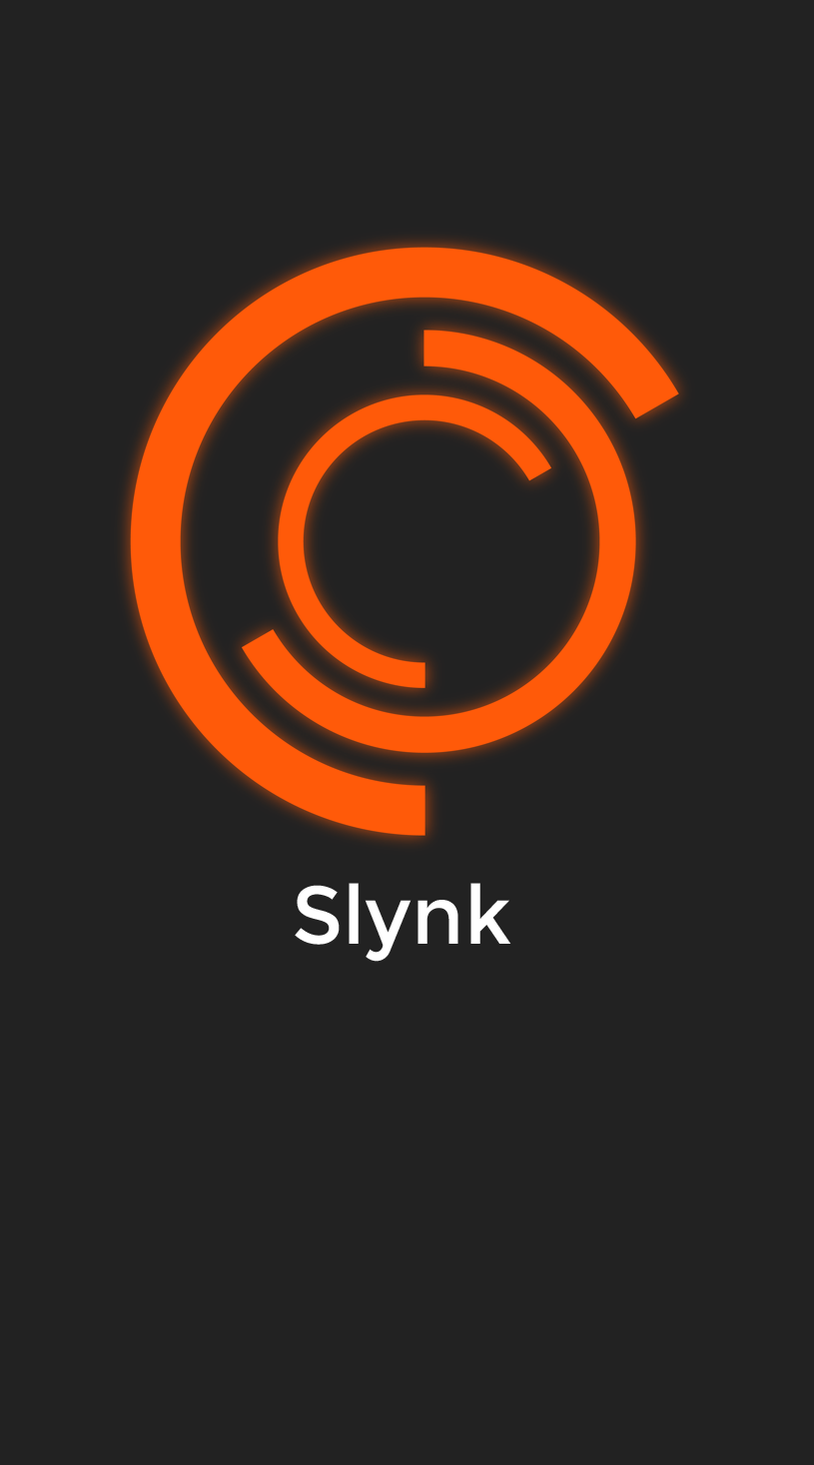
<style>
.page{position:relative;width:814px;height:1465px;background:#222222}
.page>*{position:absolute;margin:0}
.t1{font:81.4px "Montserrat-Regular";color:#ffffff}
</style>
<div class="page">
<p class="t1" style="left:295px;top:883px;width:216px;height:79px">Slynk</p>
</div>
